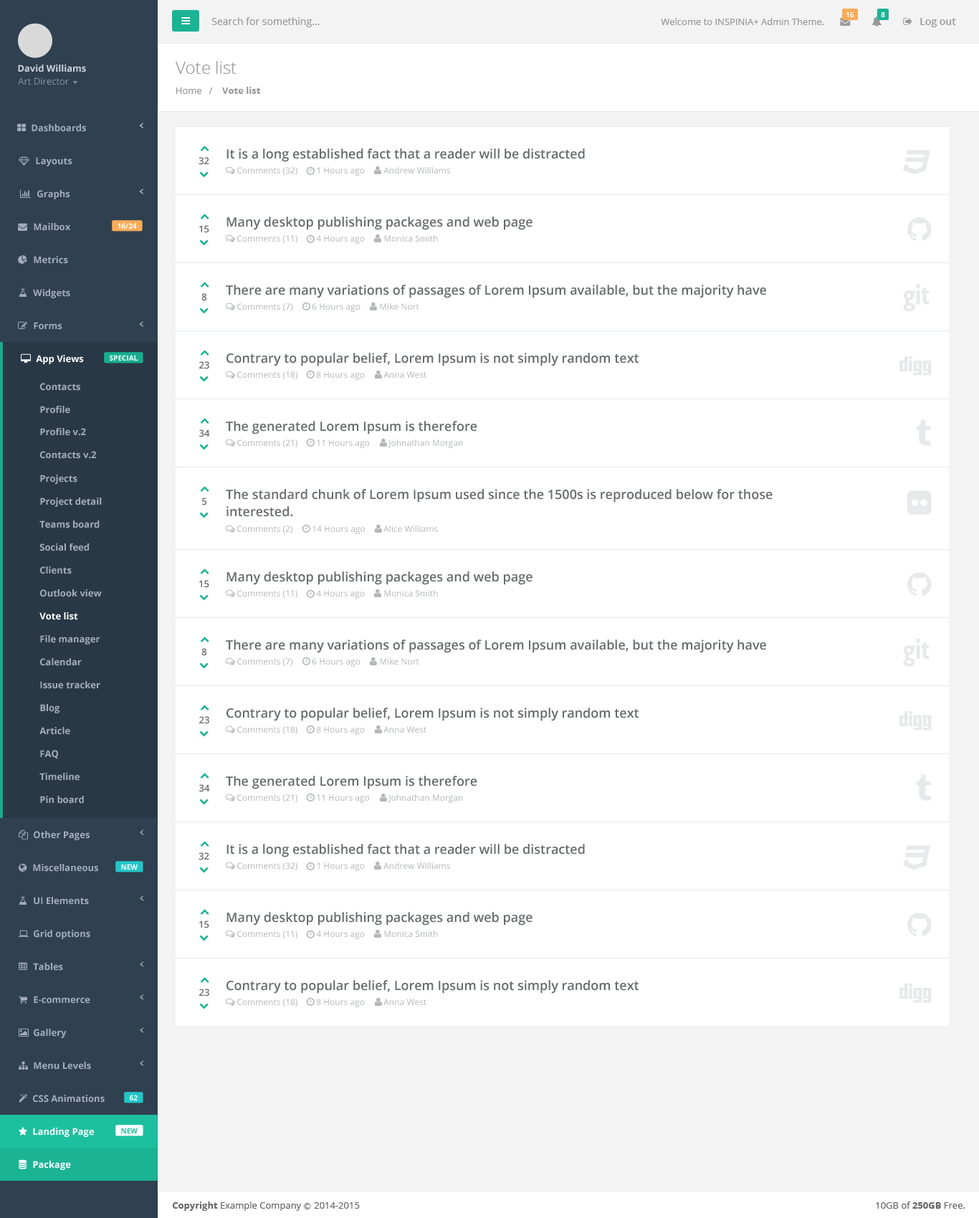
<style>
.page{position:relative;width:979px;height:1218px;background:#ffffff}
.page>*{position:absolute;margin:0}
.t1{font:10px "OpenSans";color:#999999}
.t2{font:9.3px "OpenSans";color:#999999}
.t3{font:7.2px "OpenSans-Semibold";color:#ffffff}
.t4{font:10px "OpenSans-Semibold";color:#999999}
.t5{font:9.3px "OpenSans-Bold";color:#cad1db}
.t6{font:17.2px "OpenSans-Light";color:#999999}
.t7{font:9.3px "OpenSans";color:#7d93a5}
.t8{font:9.3px "OpenSans-Bold";color:#999999}
.t9{font:9.3px "OpenSans-Bold";color:#a2acbd}
.t10{font:12.9px "OpenSans-Semibold";color:#676a6c}
.t11{font:9.3px "OpenSans-Semibold";color:#676a6c}
.t12{font:8.6px "OpenSans";color:#b4b6b8}
.t13{font:7.2px "OpenSans-Bold";color:#fefefe}
.t14{font:9.3px "OpenSans-Bold";color:#ffffff}
.t15{font:12.9px/17.2px "OpenSans-Semibold";color:#676a6c}
.t16{font:7.2px "OpenSans-Bold";color:#1cc09f}
.t17{font:9.3px "OpenSans";color:#666666}
.t18{font:9.3px "OpenSans-Bold";color:#666666}
.t19{font:7.2px "Meiryo";color:#666666}
</style>
<div class="page">
<p class="t1" style="left:211px;top:17px;width:109px;height:10px">Search for something...</p>
<p class="t2" style="left:661px;top:18px;width:163px;height:7px">Welcome to INSPINIA+ Admin Theme.</p>
<p class="t3" style="left:847px;top:12px;width:7px;height:5px">16</p>
<p class="t3" style="left:881px;top:12px;width:4px;height:5px">8</p>
<p class="t4" style="left:920px;top:18px;width:36px;height:9px">Log out</p>
<p class="t5" style="left:18px;top:65px;width:68px;height:7px">David Williams</p>
<p class="t6" style="left:176px;top:61px;width:61px;height:13px">Vote list</p>
<p class="t7" style="left:18px;top:77px;width:51px;height:8px">Art Director</p>
<p class="t8" style="left:176px;top:87px;width:85px;height:7px"><span class="t2">Home   /   </span> Vote list</p>
<p class="t9" style="left:32px;top:124px;width:54px;height:8px">Dashboards</p>
<p class="t10" style="left:227px;top:148px;width:358px;height:14px">It is a long established fact that a reader will be distracted</p>
<p class="t9" style="left:36px;top:157px;width:36px;height:9px">Layouts</p>
<p class="t11" style="left:199px;top:157px;width:10px;height:8px">32</p>
<p class="t12" style="left:237px;top:167px;width:60px;height:8px">Comments (32)</p>
<p class="t12" style="left:317px;top:167px;width:48px;height:9px">1 Hours ago</p>
<p class="t12" style="left:383px;top:167px;width:67px;height:6px">Andrew Williams</p>
<p class="t9" style="left:37px;top:190px;width:33px;height:9px">Graphs</p>
<p class="t10" style="left:227px;top:216px;width:306px;height:14px">Many desktop publishing packages and web page</p>
<p class="t9" style="left:34px;top:223px;width:36px;height:8px">Mailbox</p>
<p class="t13" style="left:118px;top:223px;width:19px;height:6px">16/24</p>
<p class="t11" style="left:199px;top:225px;width:10px;height:8px">15</p>
<p class="t12" style="left:237px;top:235px;width:60px;height:8px">Comments (11)</p>
<p class="t12" style="left:316px;top:235px;width:49px;height:9px">4 Hours ago</p>
<p class="t12" style="left:384px;top:235px;width:54px;height:7px">Monica Smith</p>
<p class="t9" style="left:34px;top:256px;width:34px;height:8px">Metrics</p>
<p class="t9" style="left:33px;top:289px;width:37px;height:9px">Widgets</p>
<p class="t11" style="left:201px;top:293px;width:6px;height:8px">8</p>
<p class="t10" style="left:226px;top:285px;width:540px;height:13px">There are many variations of passages of Lorem Ipsum available, but the majority have</p>
<p class="t12" style="left:237px;top:303px;width:55px;height:8px">Comments (7)</p>
<p class="t12" style="left:313px;top:303px;width:48px;height:9px">6 Hours ago</p>
<p class="t12" style="left:380px;top:303px;width:39px;height:7px">Mike Nort</p>
<p class="t9" style="left:34px;top:322px;width:28px;height:8px">Forms</p>
<p class="t10" style="left:227px;top:353px;width:412px;height:13px">Contrary to popular belief, Lorem Ipsum is not simply random text</p>
<p class="t14" style="left:36px;top:355px;width:48px;height:9px">App Views</p>
<p class="t13" style="left:110px;top:355px;width:28px;height:6px">SPECIAL</p>
<p class="t11" style="left:199px;top:361px;width:10px;height:8px">23</p>
<p class="t12" style="left:237px;top:371px;width:60px;height:8px">Comments (18)</p>
<p class="t12" style="left:316px;top:371px;width:49px;height:9px">8 Hours ago</p>
<p class="t12" style="left:383px;top:371px;width:43px;height:7px">Anna West</p>
<p class="t9" style="left:40px;top:383px;width:40px;height:8px">Contacts</p>
<p class="t9" style="left:40px;top:406px;width:30px;height:8px">Profile</p>
<p class="t10" style="left:226px;top:421px;width:251px;height:13px">The generated Lorem Ipsum is therefore</p>
<p class="t9" style="left:40px;top:428px;width:46px;height:8px">Profile v.2</p>
<p class="t11" style="left:199px;top:429px;width:11px;height:8px">34</p>
<p class="t12" style="left:237px;top:439px;width:60px;height:8px">Comments (21)</p>
<p class="t12" style="left:317px;top:439px;width:52px;height:9px">11 Hours ago</p>
<p class="t12" style="left:388px;top:439px;width:75px;height:9px">Johnathan Morgan</p>
<p class="t9" style="left:40px;top:451px;width:56px;height:8px">Contacts v.2</p>
<p class="t9" style="left:40px;top:475px;width:37px;height:9px">Projects</p>
<p class="t9" style="left:40px;top:497px;width:62px;height:10px">Project detail</p>
<p class="t11" style="left:202px;top:497px;width:4px;height:8px">5</p>
<p class="t15" style="left:226px;top:489px;width:547px;height:28px">The standard chunk of Lorem Ipsum used since the 1500s is reproduced below for those<br>interested.</p>
<p class="t9" style="left:39px;top:520px;width:61px;height:8px">Teams board</p>
<p class="t12" style="left:237px;top:525px;width:55px;height:8px">Comments (2)</p>
<p class="t12" style="left:313px;top:525px;width:52px;height:9px">14 Hours ago</p>
<p class="t12" style="left:383px;top:525px;width:55px;height:7px">Alice Williams</p>
<p class="t9" style="left:39px;top:543px;width:50px;height:8px">Social feed</p>
<p class="t9" style="left:40px;top:566px;width:32px;height:8px">Clients</p>
<p class="t11" style="left:199px;top:580px;width:10px;height:8px">15</p>
<p class="t10" style="left:227px;top:571px;width:306px;height:14px">Many desktop publishing packages and web page</p>
<p class="t9" style="left:40px;top:589px;width:62px;height:8px">Outlook view</p>
<p class="t12" style="left:237px;top:590px;width:60px;height:8px">Comments (11)</p>
<p class="t12" style="left:316px;top:590px;width:49px;height:9px">4 Hours ago</p>
<p class="t12" style="left:384px;top:590px;width:54px;height:6px">Monica Smith</p>
<p class="t14" style="left:39px;top:612px;width:39px;height:8px">Vote list</p>
<p class="t9" style="left:40px;top:635px;width:60px;height:9px">File manager</p>
<p class="t10" style="left:226px;top:639px;width:540px;height:14px">There are many variations of passages of Lorem Ipsum available, but the majority have</p>
<p class="t11" style="left:201px;top:648px;width:6px;height:8px">8</p>
<p class="t9" style="left:40px;top:658px;width:42px;height:8px">Calendar</p>
<p class="t12" style="left:237px;top:658px;width:55px;height:8px">Comments (7)</p>
<p class="t12" style="left:313px;top:658px;width:48px;height:9px">6 Hours ago</p>
<p class="t12" style="left:380px;top:658px;width:39px;height:6px">Mike Nort</p>
<p class="t9" style="left:40px;top:681px;width:60px;height:8px">Issue tracker</p>
<p class="t9" style="left:40px;top:704px;width:19px;height:9px">Blog</p>
<p class="t10" style="left:227px;top:707px;width:412px;height:14px">Contrary to popular belief, Lorem Ipsum is not simply random text</p>
<p class="t11" style="left:199px;top:716px;width:10px;height:8px">23</p>
<p class="t9" style="left:39px;top:727px;width:31px;height:8px">Article</p>
<p class="t12" style="left:237px;top:726px;width:60px;height:8px">Comments (18)</p>
<p class="t12" style="left:316px;top:726px;width:49px;height:9px">8 Hours ago</p>
<p class="t12" style="left:383px;top:726px;width:43px;height:7px">Anna West</p>
<p class="t9" style="left:40px;top:750px;width:18px;height:9px">FAQ</p>
<p class="t9" style="left:39px;top:773px;width:41px;height:8px">Timeline</p>
<p class="t11" style="left:199px;top:784px;width:11px;height:8px">34</p>
<p class="t10" style="left:226px;top:776px;width:251px;height:13px">The generated Lorem Ipsum is therefore</p>
<p class="t9" style="left:40px;top:796px;width:44px;height:8px">Pin board</p>
<p class="t12" style="left:237px;top:794px;width:60px;height:8px">Comments (21)</p>
<p class="t12" style="left:317px;top:794px;width:52px;height:9px">11 Hours ago</p>
<p class="t12" style="left:388px;top:794px;width:75px;height:9px">Johnathan Morgan</p>
<p class="t9" style="left:34px;top:831px;width:56px;height:9px">Other Pages</p>
<p class="t10" style="left:227px;top:844px;width:358px;height:13px">It is a long established fact that a reader will be distracted</p>
<p class="t11" style="left:199px;top:852px;width:10px;height:8px">32</p>
<p class="t9" style="left:33px;top:864px;width:65px;height:8px">Miscellaneous</p>
<p class="t13" style="left:121px;top:864px;width:17px;height:5px">NEW</p>
<p class="t12" style="left:237px;top:862px;width:60px;height:8px">Comments (32)</p>
<p class="t12" style="left:317px;top:862px;width:48px;height:9px">1 Hours ago</p>
<p class="t12" style="left:383px;top:862px;width:67px;height:7px">Andrew Williams</p>
<p class="t9" style="left:34px;top:897px;width:55px;height:8px">UI Elements</p>
<p class="t10" style="left:227px;top:912px;width:306px;height:13px">Many desktop publishing packages and web page</p>
<p class="t9" style="left:34px;top:930px;width:56px;height:9px">Grid options</p>
<p class="t11" style="left:199px;top:920px;width:10px;height:8px">15</p>
<p class="t12" style="left:237px;top:930px;width:60px;height:8px">Comments (11)</p>
<p class="t12" style="left:316px;top:930px;width:49px;height:9px">4 Hours ago</p>
<p class="t12" style="left:384px;top:930px;width:54px;height:7px">Monica Smith</p>
<p class="t9" style="left:33px;top:963px;width:30px;height:8px">Tables</p>
<p class="t11" style="left:199px;top:988px;width:10px;height:8px">23</p>
<p class="t10" style="left:227px;top:980px;width:412px;height:13px">Contrary to popular belief, Lorem Ipsum is not simply random text</p>
<p class="t9" style="left:34px;top:996px;width:56px;height:8px">E-commerce</p>
<p class="t12" style="left:237px;top:998px;width:60px;height:8px">Comments (18)</p>
<p class="t12" style="left:316px;top:998px;width:49px;height:9px">8 Hours ago</p>
<p class="t12" style="left:383px;top:998px;width:43px;height:7px">Anna West</p>
<p class="t9" style="left:34px;top:1029px;width:33px;height:9px">Gallery</p>
<p class="t9" style="left:34px;top:1062px;width:57px;height:7px">Menu Levels</p>
<p class="t9" style="left:33px;top:1095px;width:72px;height:7px">CSS Animations</p>
<p class="t13" style="left:129px;top:1095px;width:9px;height:5px">62</p>
<p class="t14" style="left:33px;top:1128px;width:62px;height:9px">Landing Page</p>
<p class="t16" style="left:121px;top:1128px;width:17px;height:5px">NEW</p>
<p class="t14" style="left:33px;top:1160px;width:38px;height:10px">Package</p>
<p class="t17" style="left:172px;top:1201px;width:188px;height:10px"><span class="t18">Copyright</span> Example Company <span class="t19">Ⓒ </span>2014-2015</p>
<p class="t17" style="left:876px;top:1201px;width:90px;height:8px">10GB of <span class="t18">250GB</span> Free.</p>
</div>
